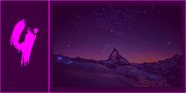
<style>
.page{position:relative;width:186px;height:93px;background:#400040}
.page>*{position:absolute;margin:0}
.t1{font:60px "LeviReBrushed";color:#ff00ff}
</style>
<div class="page">
<p class="t1" style="left:10px;top:19px;width:28px;height:47px">4</p>
</div>
